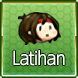
<style>
.page{position:relative;width:78px;height:78px}
.page>*{position:absolute;margin:0}
.t1{font:18px "UDShinGoPro-Regular";letter-spacing:-0.04em;color:#ffffff;scale:0.9 1}
</style>
<div class="page">
<p class="t1" style="left:13px;top:50px;width:52px;height:16px">Latihan</p>
</div>
